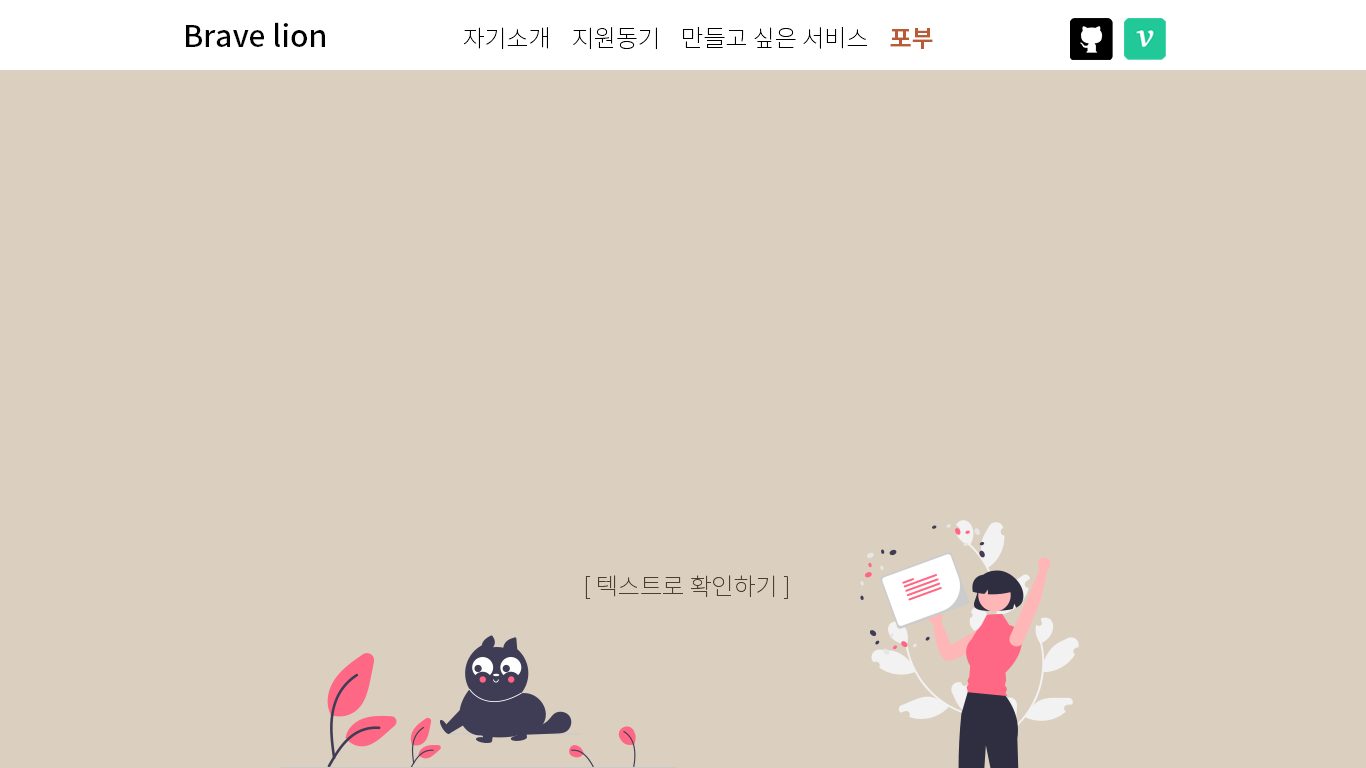
<style>
.page{position:relative;width:1366px;height:768px;background:#dbd0c0}
.page>*{position:absolute;margin:0}
.t1{font:30px "NotoSansKR-Medium";color:#000000}
.t2{font:24px "NotoSansKR-Thin";color:#000000}
.t3{font:24px "NotoSansKR-Bold";color:#b85c38}
.t4{font:24px "NotoSansKR-Thin";color:#4a3f32}
</style>
<div class="page">
<p class="t1" style="left:186px;top:22px;width:139px;height:25px">Brave lion</p>
<p class="t2" style="left:464px;top:26px;width:469px;height:24px">자기소개    지원동기    만들고 싶은 서비스    <span class="t3">포부</span></p>
<p class="t4" style="left:585px;top:575px;width:203px;height:24px">[ 텍스트로 확인하기 ]</p>
</div>
